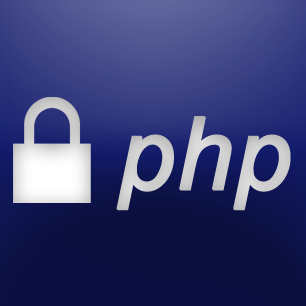
<style>
.page{position:relative;width:306px;height:306px}
.page>*{position:absolute;margin:0}
.t1{font:100px "Arial-ItalicMT";color:#cecece;font-weight:bold}
</style>
<div class="page">
<p class="t1" style="left:116px;top:116px;width:175px;height:95px">php</p>
</div>
